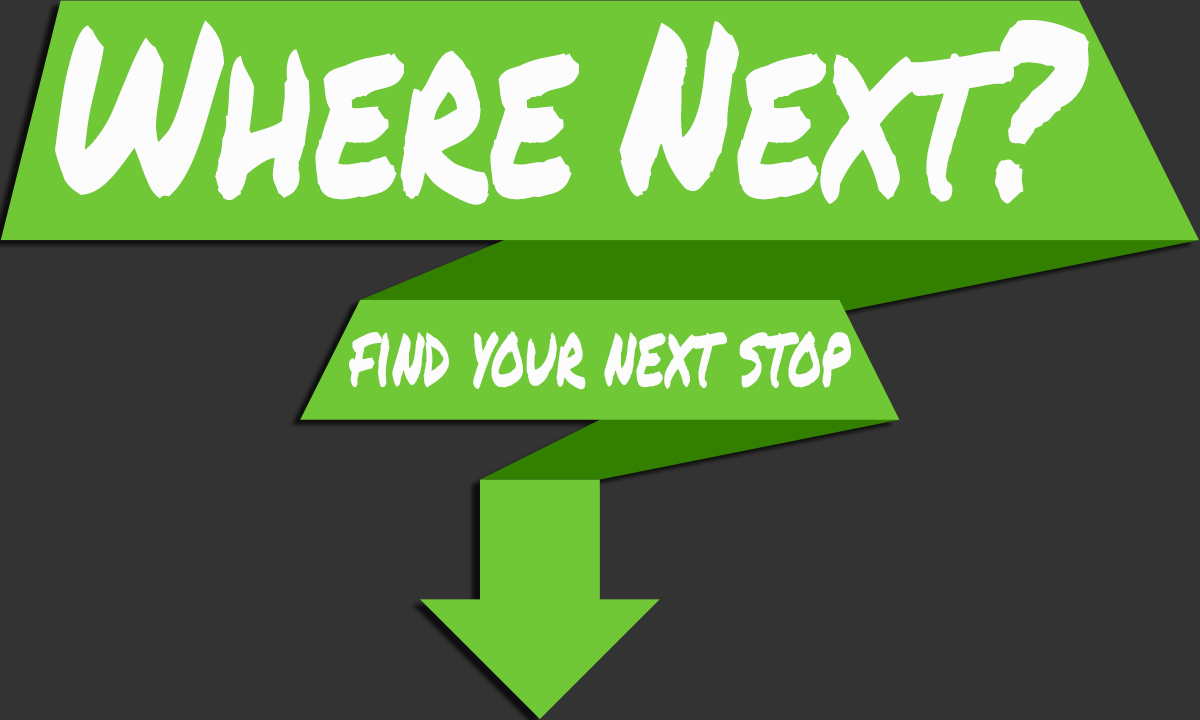
<style>
.page{position:relative;width:1200px;height:720px;background:#333333}
.page>*{position:absolute;margin:0}
.t1{font:239.5px "PermanentMarker";letter-spacing:0.005em;color:#fdfcfc;scale:0.69 1}
.t2{font:89px "PermanentMarker";letter-spacing:0.005em;color:#fdfcfc;scale:0.61 1}
</style>
<div class="page">
<p class="t1" style="left:55px;top:20px;width:1034px;height:185px">Where Next?</p>
<p class="t2" style="left:349px;top:331px;width:502px;height:59px">find your next stop</p>
</div>
